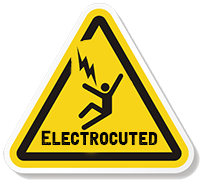
<style>
.page{position:relative;width:200px;height:180px;background:#ffffff}
.page>*{position:absolute;margin:0}
.t1{font:20px "Iron&Brine";color:#000000}
</style>
<div class="page">
<p class="t1" style="left:41px;top:130px;width:117px;height:16px">Electrocuted</p>
</div>
